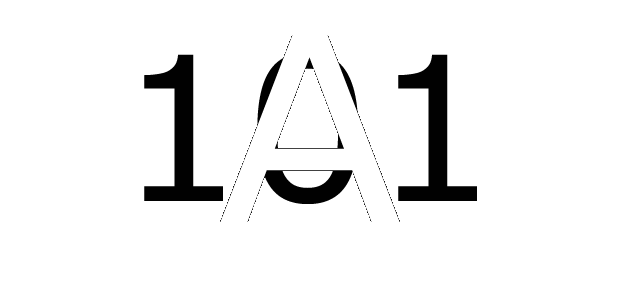
<style>
.page{position:relative;width:620px;height:300px;background:#ffffff}
.page>*{position:absolute;margin:0}
.t1{font:200px "Verdana";color:#010101}
</style>
<div class="page">
<p class="t1" style="left:144px;top:52px;width:333px;height:152px">101</p>
</div>
